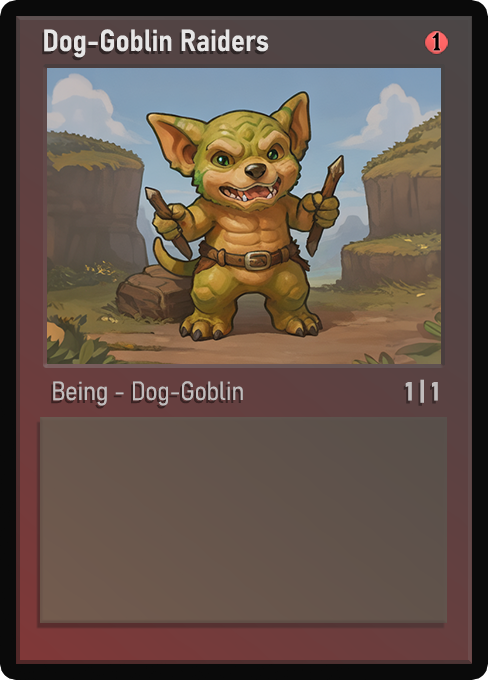
<style>
.page{position:relative;width:488px;height:680px}
.page>*{position:absolute;margin:0}
.t1{font:30px "Bahnschrift-SemiBoldSemiCondensed";color:#f2f2f2;font-weight:bold}
.t2{font:25px "WTRRoycroft";color:#000000;font-weight:bold;scale:1.09 1}
.t3{font:26px "Bahnschrift-LightSemiCondensed";color:#c8c8c8;font-weight:bold}
.t4{font:26px "Bahnschrift-BoldSemiCondensed";color:#c1bdbd;font-weight:bold}
</style>
<div class="page">
<p class="t1" style="left:44px;top:29px;width:225px;height:29px;opacity:0.9">Dog-Goblin Raiders</p>
<p class="t2" style="left:432px;top:32px;width:9px;height:19px">1</p>
<p class="t3" style="left:53px;top:381px;width:190px;height:25px;opacity:0.9">Being - Dog-Goblin</p>
<p class="t4" style="left:405px;top:379px;width:33px;height:24px">1 | 1</p>
</div>
